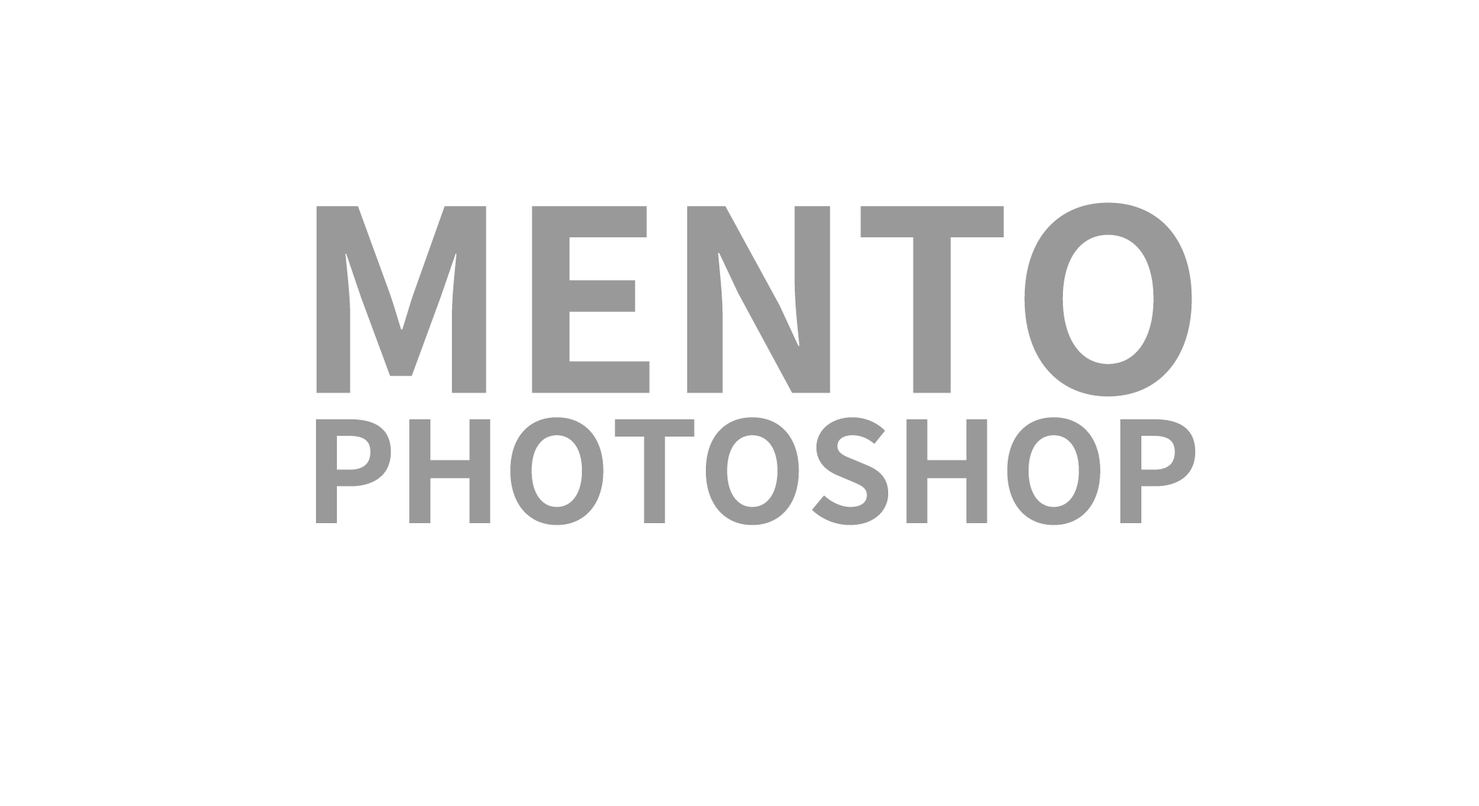
<style>
.page{position:relative;width:1479px;height:806px;background:#ffffff}
.page>*{position:absolute;margin:0}
.t1{font:252.3px "NotoSansCJKkr-Bold";color:#999999;text-transform:uppercase}
.t2{font:140.1px "NotoSansCJKkr-Bold";color:#999999;text-transform:uppercase}
</style>
<div class="page">
<p class="t1" style="left:316px;top:202px;width:876px;height:195px">mento</p>
<p class="t2" style="left:316px;top:417px;width:880px;height:109px">photoshop</p>
</div>
